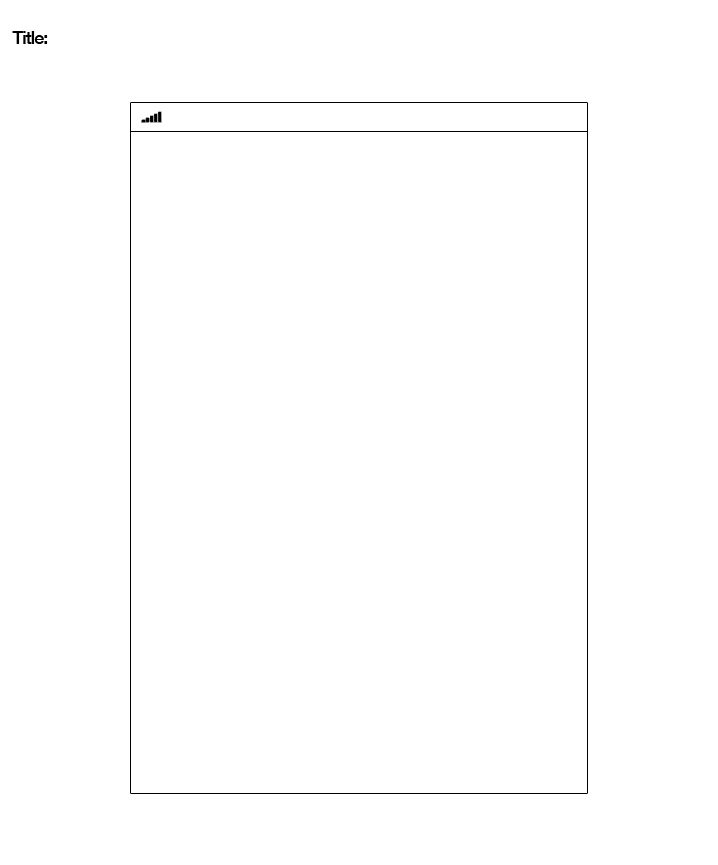
<style>
.page{position:relative;width:718px;height:865px;background:#ffffff}
.page>*{position:absolute;margin:0}
.t1{font:18px "HelveticaNeue-Medium";letter-spacing:-0.05em;color:#000000}
</style>
<div class="page">
<p class="t1" style="left:12px;top:31px;width:36px;height:13px">Title:</p>
</div>
